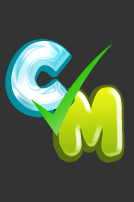
<style>
.page{position:relative;width:134px;height:202px;background:#333333}
.page>*{position:absolute;margin:0}
.t1{font:80px "GROBOLD";letter-spacing:-0.01em}
.t2{font:90px "BubbleGum";letter-spacing:-0.05em}
</style>
<div class="page">
<p class="t1" style="left:11px;top:41px;width:62px;height:71px">C</p>
<p class="t2" style="left:58px;top:87px;width:65px;height:70px">m</p>
</div>
